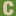
<style>
.page{position:relative;width:16px;height:16px;background:#5c832f}
.page>*{position:absolute;margin:0}
.t1{font:17.8px "Swiss721BT-BlackCondensed";color:#d8caa8;font-weight:bold;scale:1.06 1}
</style>
<div class="page">
<p class="t1" style="left:3px;top:1px;width:11px;height:15px">C</p>
</div>
